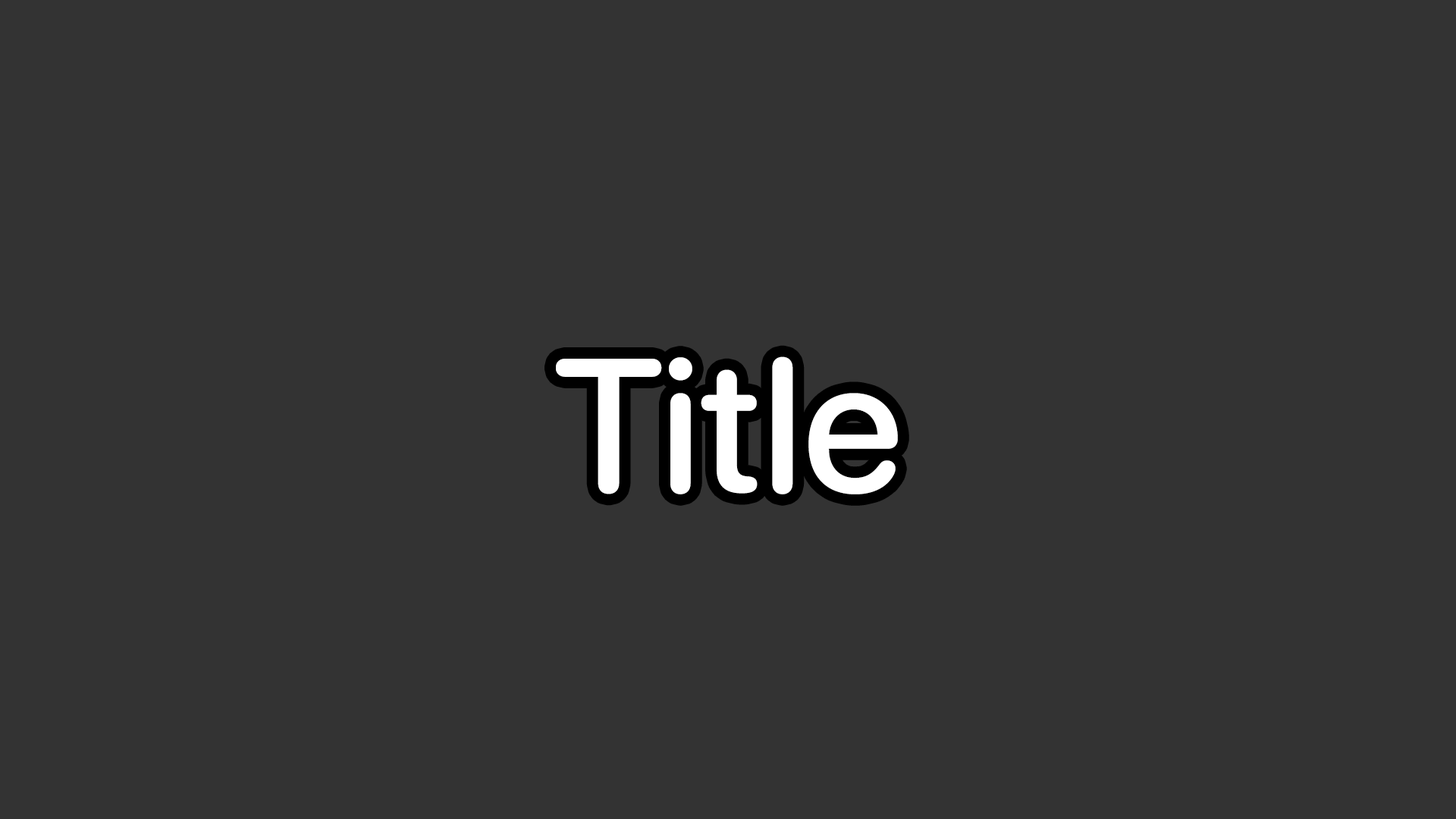
<style>
.page{position:relative;width:1456px;height:819px;background:#333333}
.page>*{position:absolute;margin:0}
.t1{font:189.6px "SFProRounded-Medium";color:#ffffff}
</style>
<div class="page">
<p class="t1" style="left:556px;top:356px;width:342px;height:138px">Title</p>
</div>
